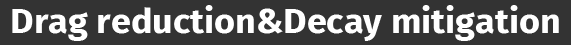
<style>
.page{position:relative;width:571px;height:45px;background:#333333}
.page>*{position:absolute;margin:0}
.t1{font:34.2px "FiraSans-Bold";color:#ffffff;scale:1.05 1}
</style>
<div class="page">
<p class="t1" style="left:12px;top:5px;width:547px;height:36px">Drag reduction&amp;Decay mitigation</p>
</div>
